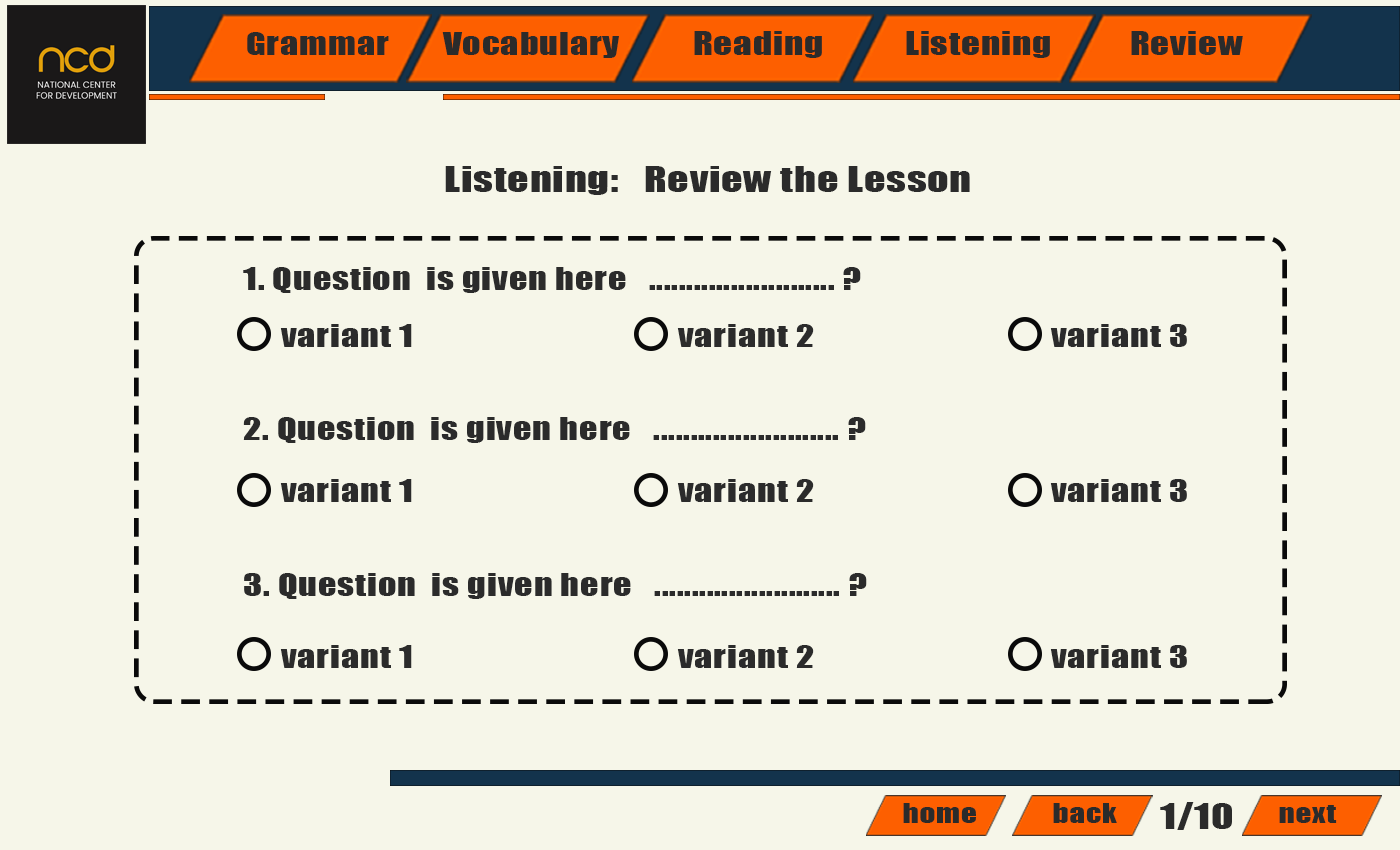
<style>
.page{position:relative;width:1400px;height:850px;background:#f6f6e9}
.page>*{position:absolute;margin:0}
.t1{font:29.2px "Impact";letter-spacing:0.02em;color:#2b2b2b;scale:1.25 1}
.t2{font:29.9px "Impact";letter-spacing:0.02em;color:#2b2b2b;scale:1.25 1}
.t3{font:33.5px "Impact";letter-spacing:0.02em;color:#2b2b2b;scale:1.25 1}
.t4{font:25px "Impact";letter-spacing:0.02em;color:#2b2b2b;scale:1.25 1}
.t5{font:33.3px "Impact";letter-spacing:0.02em;color:#2b2b2b;scale:1.25 1}
</style>
<div class="page">
<p class="t1" style="left:247px;top:32px;width:142px;height:23px">Grammar</p>
<p class="t1" style="left:442px;top:32px;width:177px;height:26px">Vocabulary</p>
<p class="t2" style="left:694px;top:31px;width:128px;height:27px">Reading</p>
<p class="t2" style="left:906px;top:31px;width:144px;height:27px">Listening</p>
<p class="t2" style="left:1131px;top:31px;width:112px;height:24px">Review</p>
<p class="t3" style="left:445px;top:166px;width:525px;height:29px">Listening:   Review the Lesson</p>
<p class="t1" style="left:243px;top:267px;width:618px;height:26px">1. Question  is given here   ......................... ?</p>
<p class="t1" style="left:280px;top:324px;width:132px;height:23px">variant 1</p>
<p class="t1" style="left:677px;top:324px;width:137px;height:23px">variant 2</p>
<p class="t1" style="left:1050px;top:324px;width:137px;height:23px">variant 3</p>
<p class="t1" style="left:243px;top:417px;width:623px;height:26px">2. Question  is given here   ......................... ?</p>
<p class="t1" style="left:280px;top:479px;width:132px;height:23px">variant 1</p>
<p class="t1" style="left:677px;top:479px;width:137px;height:23px">variant 2</p>
<p class="t1" style="left:1050px;top:479px;width:137px;height:23px">variant 3</p>
<p class="t1" style="left:244px;top:573px;width:623px;height:26px">3. Question  is given here   ......................... ?</p>
<p class="t1" style="left:280px;top:645px;width:132px;height:23px">variant 1</p>
<p class="t1" style="left:677px;top:645px;width:137px;height:23px">variant 2</p>
<p class="t1" style="left:1050px;top:645px;width:137px;height:23px">variant 3</p>
<p class="t4" style="left:903px;top:803px;width:73px;height:20px">home</p>
<p class="t4" style="left:1053px;top:803px;width:64px;height:20px">back</p>
<p class="t5" style="left:1160px;top:802px;width:72px;height:28px">1/10</p>
<p class="t4" style="left:1279px;top:805px;width:58px;height:18px">next</p>
</div>
